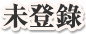
<style>
.page{position:relative;width:86px;height:34px;background:#fff6f2}
.page>*{position:absolute;margin:0}
.t1{font:26px "RyuminPro-ExBold";color:#333333;font-weight:bold}
</style>
<div class="page">
<p class="t1" style="left:3px;top:3px;width:79px;height:26px">未登錄</p>
</div>
